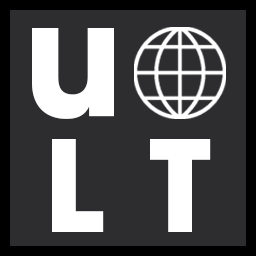
<style>
.page{position:relative;width:256px;height:256px;background:#2d2d30}
.page>*{position:absolute;margin:0}
.t1{font:158.3px "ITCAvantGardePro-Bold";color:#ffffff}
.t2{font:125px "ITCAvantGardePro-Bold";letter-spacing:0.025em;color:#ffffff}
.t3{font:125px "ITCAvantGardePro-Bold";color:#ffffff}
</style>
<div class="page">
<p class="t1" style="left:32px;top:28px;width:82px;height:91px">u</p>
<p class="t2" style="left:52px;top:139px;width:159px;height:93px"><span class="t3"><br></span>L T</p>
</div>
